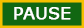
<style>
.page{position:relative;width:84px;height:28px;background:#116712}
.page>*{position:absolute;margin:0}
.t1{font:17px "Verdana";color:#ffffff;font-weight:bold}
</style>
<div class="page">
<p class="t1" style="left:14px;top:7px;width:57px;height:13px">PAUSE</p>
</div>
